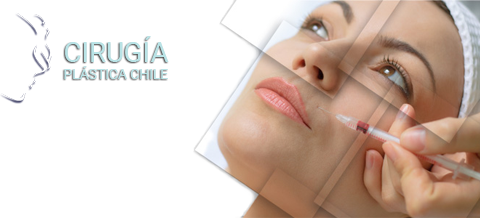
<style>
.page{position:relative;width:480px;height:218px;background:#ffffff}
.page>*{position:absolute;margin:0}
.t1{font:13.8px "Roboto-Regular";color:#b9e3e6}
.t2{font:27.7px "Roboto-Regular";color:#b9e3e6}
</style>
<div class="page">
<p class="t1" style="left:64px;top:36px;width:105px;height:43px;text-align:center"><span class="t2">CIRUGÍA<br></span>PLÁSTICA CHILE</p>
</div>
